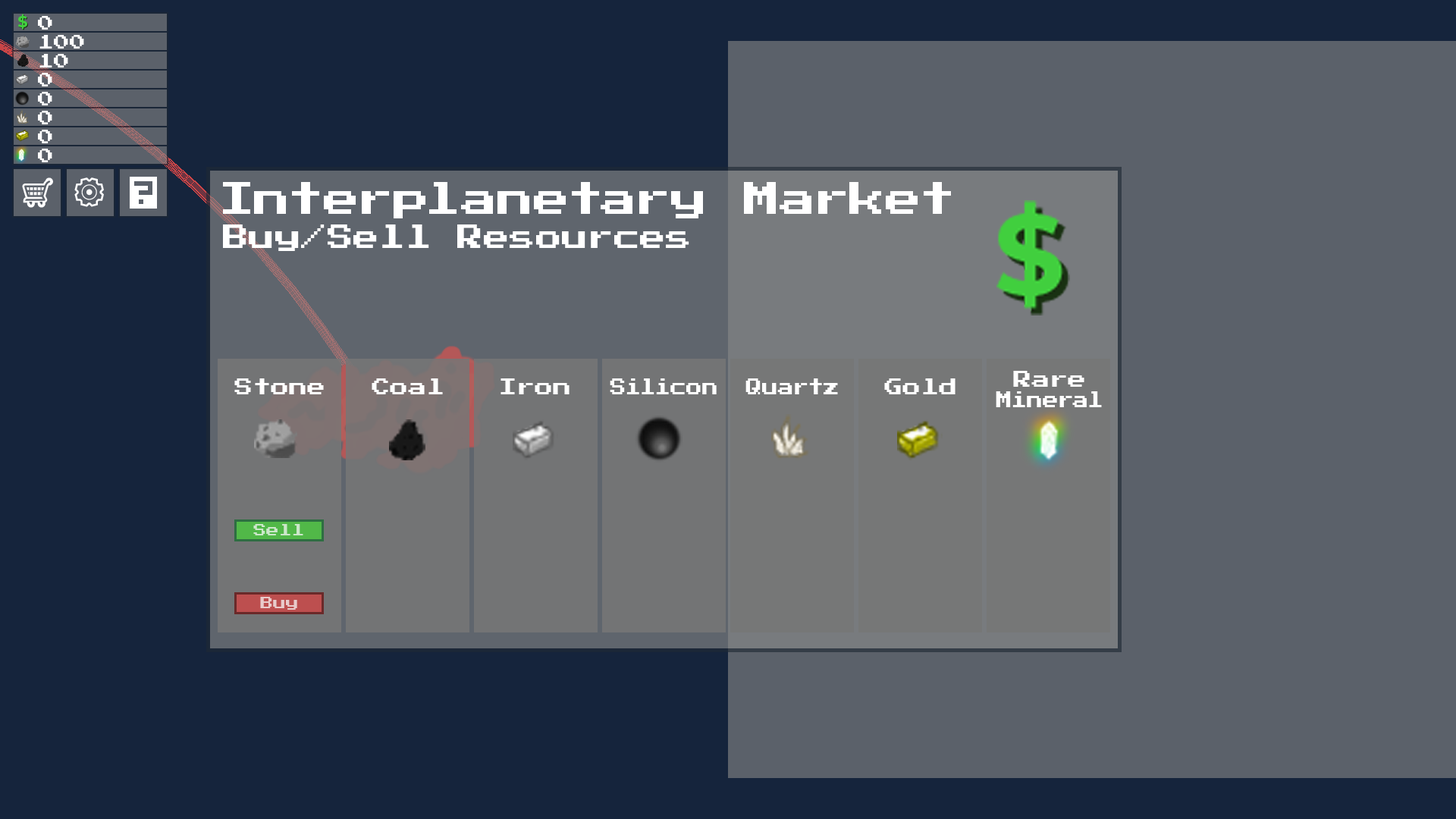
<style>
.page{position:relative;width:1456px;height:819px;background:#5b616a}
.page>*{position:absolute;margin:0}
.t1{font:36.4px "PressStart2P-Regular";color:#ffffff}
.t2{font:26.1px "PressStart2P-Regular";color:#ffffff}
.t3{font:18.2px "PressStart2P-Regular";color:#ffffff}
.t4{font:18.2px "PressStart2P-Regular";color:#ffffff;scale:0.87 1}
.t5{font:12.7px "PressStart2P-Regular";color:#cce7ca}
.t6{font:12.7px "PressStart2P-Regular";color:#e9cbcb}
</style>
<div class="page">
<p class="t1" style="left:223px;top:182px;width:728px;height:36px">Interplanetary Market</p>
<p class="t2" style="left:223px;top:224px;width:466px;height:27px">Buy/Sell Resources</p>
<p class="t3" style="left:1013px;top:371px;width:71px;height:16px">Rare</p>
<p class="t3" style="left:234px;top:378px;width:90px;height:16px">Stone</p>
<p class="t3" style="left:372px;top:378px;width:71px;height:16px">Coal</p>
<p class="t3" style="left:500px;top:378px;width:70px;height:16px">Iron</p>
<p class="t4" style="left:610px;top:378px;width:107px;height:16px">Silicon</p>
<p class="t4" style="left:745px;top:378px;width:93px;height:16px">Quartz</p>
<p class="t3" style="left:884px;top:378px;width:71px;height:16px">Gold</p>
<p class="t4" style="left:996px;top:391px;width:106px;height:16px">Mineral</p>
<p class="t5" style="left:253px;top:524px;width:50px;height:11px">Sell</p>
<p class="t6" style="left:260px;top:597px;width:37px;height:13px">Buy</p>
</div>
